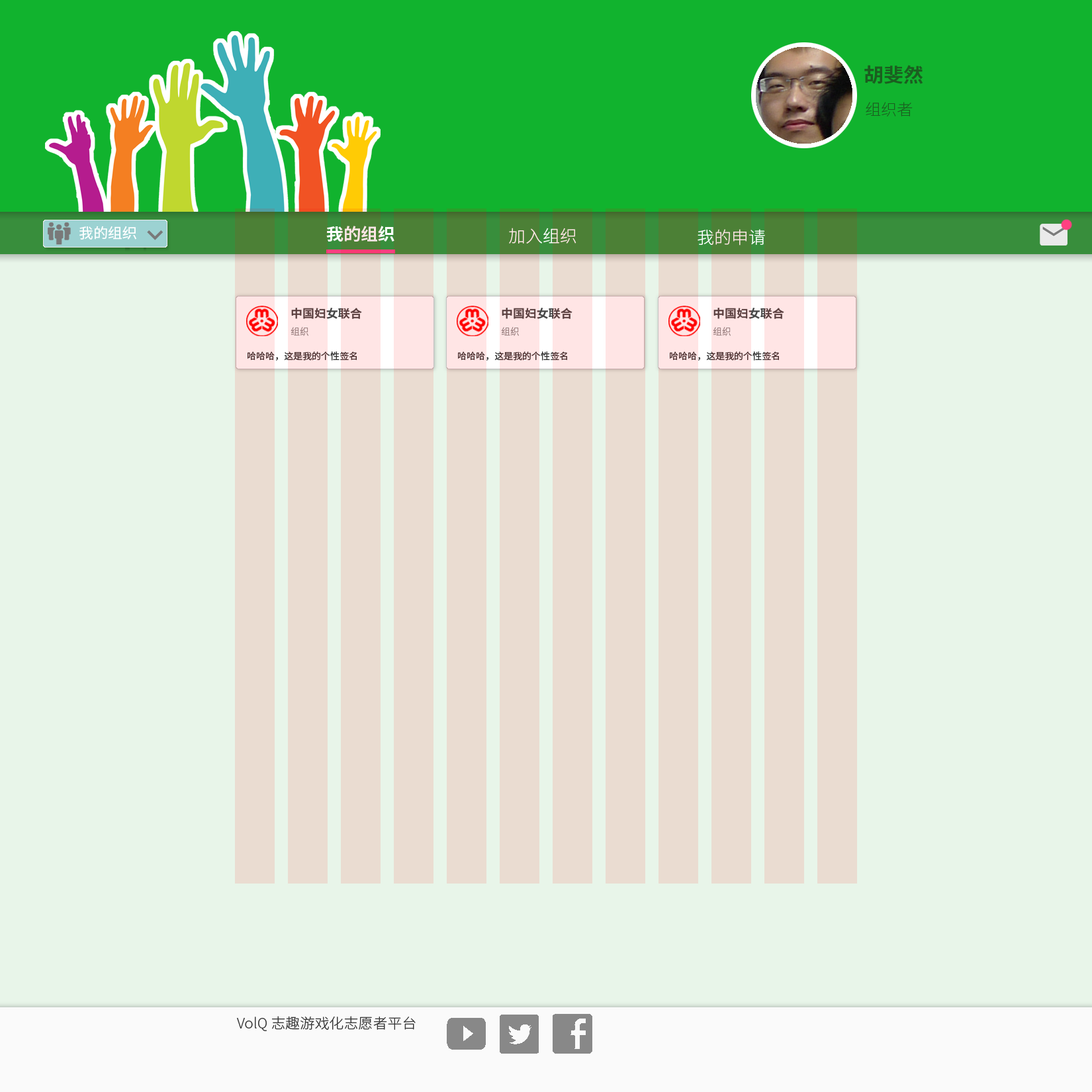
<style>
.page{position:relative;width:1092px;height:1092px;background:#e8f5e9}
.page>*{position:absolute;margin:0}
.t1{font:19.5px "NotoSansCJKsc-Bold";color:#1b5e20}
.t2{font:15.6px "NotoSansCJKsc-Thin";color:#1b5e20}
.t3{font:14.3px "NotoSansCJKsc-Regular";color:#ffffff}
.t4{font:16.9px "NotoSansCJKsc-Bold"}
.t5{font:16.9px "NotoSansCJKsc-Light";color:#ffe5e5}
.t6{font:16.9px "NotoSansCJKsc-Light"}
.t7{font:14.3px "NotoSansCJKsc-Light";color:#353535}
</style>
<div class="page">
<p class="t1" style="left:864px;top:65px;width:59px;height:19px">胡斐然</p>
<p class="t2" style="left:866px;top:102px;width:47px;height:14px">组织者</p>
<p class="t3" style="left:79px;top:226px;width:57px;height:14px">我的组织</p>
<p class="t4" style="left:326px;top:226px;width:68px;height:16px">我的组织</p>
<p class="t5" style="left:509px;top:228px;width:67px;height:16px">加入组织</p>
<p class="t6" style="left:698px;top:229px;width:67px;height:17px">我的申请</p>
<p class="t7" style="left:237px;top:1016px;width:179px;height:15px">VolQ 志趣游戏化志愿者平台</p>
</div>
